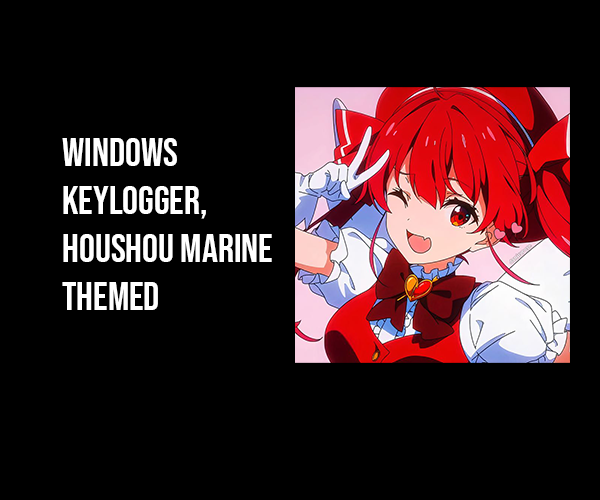
<style>
.page{position:relative;width:600px;height:500px;background:#000000}
.page>*{position:absolute;margin:0}
.t1{font:39.8px "BebasNeue-Regular";color:#ffffff}
</style>
<div class="page">
<p class="t1" style="left:62px;top:138px;width:210px;height:172px">windows <br>keylogger,<br>houshou marine <br>themed</p>
</div>
